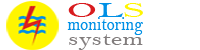
<style>
.page{position:relative;width:200px;height:50px;background:#ffffff}
.page>*{position:absolute;margin:0}
.t1{font:20.6px "BellMT";color:#d81b1e;scale:2 1}
.t2{font:20.6px "BellMT";color:#0090e5;scale:2 1}
.t3{font:20.6px "BellMT";color:#fff500;scale:2 1}
.t4{font:19.6px "BellMT";color:#0090e5;scale:0.83 1}
.t5{font:19.6px "BellMT";color:#827d7d;scale:1.34 1}
</style>
<div class="page">
<p class="t1" style="left:68px;top:3px;width:75px;height:14px">O<span class="t2">L</span><span class="t3">S</span></p>
<p class="t4" style="left:67px;top:17px;width:76px;height:18px">monitoring</p>
<p class="t5" style="left:69px;top:34px;width:74px;height:16px">system</p>
</div>
